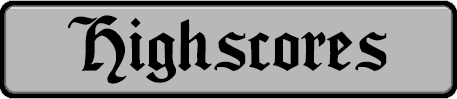
<style>
.page{position:relative;width:457px;height:99px;background:#b8b8b8}
.page>*{position:absolute;margin:0}
.t1{font:66.7px "Seagramtfb";color:#000000}
</style>
<div class="page">
<p class="t1" style="left:68px;top:15px;width:319px;height:69px">Highscores</p>
</div>
